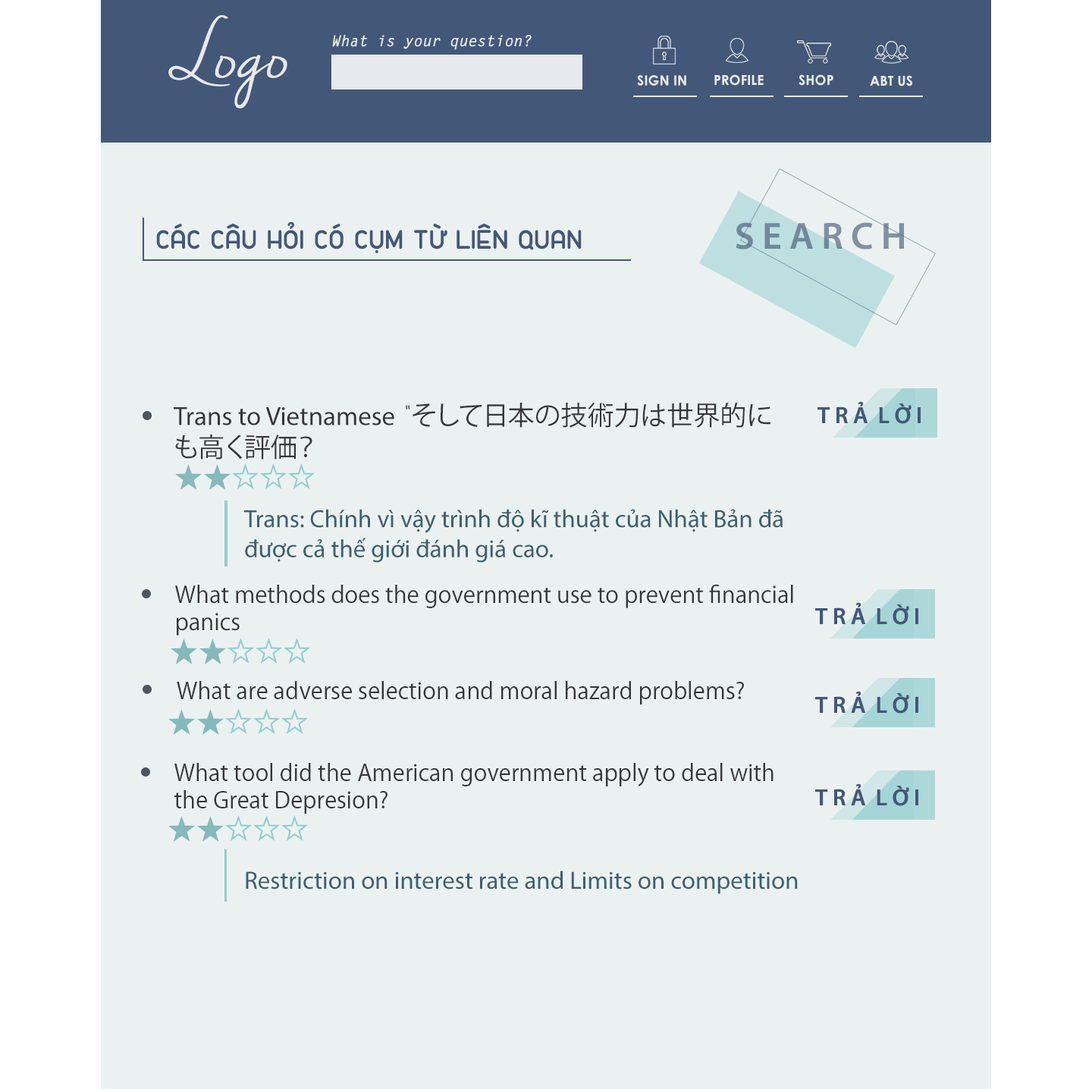
<style>
.page{position:relative;width:1092px;height:1092px;background:#ebf1f1}
.page>*{position:absolute;margin:0}
.t1{font:72.4px "NellaSueDemo";color:#ffffff}
.t2{font:15.2px "LetterGothicStd-BoldSlanted";color:#ffffff}
.t3{font:13.6px "CenturyGothic-Bold";color:#ffffff}
.t4{font:26.5px "FS-Nokio-Bold";color:#435878}
.t5{font:37.9px "MyriadPro-Semibold";color:#70899b}
.t6{font:26.5px "KozGoPr6N-Regular";color:#363636}
.t7{font:26.5px "MyriadPro-Regular";color:#363636}
.t8{font:26.5px "FS-Nokio-Light";color:#363636}
.t9{font:23.6px "MyriadPro-Semibold";color:#435878}
.t10{font:25px "MyriadPro-Regular";color:#3e606f}
.t11{font:22.7px "KozGoPr6N-Regular";color:#363636}
</style>
<div class="page">
<p class="t1" style="left:168px;top:15px;width:119px;height:93px">Logo</p>
<p class="t2" style="left:332px;top:35px;width:200px;height:15px">What is your question?</p>
<p class="t3" style="left:637px;top:75px;width:49px;height:11px">SIGN IN</p>
<p class="t3" style="left:714px;top:74px;width:50px;height:12px">PROFILE</p>
<p class="t3" style="left:799px;top:74px;width:34px;height:12px">SHOP</p>
<p class="t3" style="left:870px;top:75px;width:42px;height:11px">ABT US</p>
<p class="t4" style="left:156px;top:221px;width:426px;height:32px">CÁC CÂU HỎI CÓ CỤM TỪ LIÊN QUAN</p>
<p class="t5" style="left:736px;top:222px;width:168px;height:27px">S E A R C H</p>
<p class="t6" style="left:174px;top:402px;width:596px;height:58px"><span class="t7">Trans to Vietnamese</span><span class="t8"> “</span>そして日本の技術力は世界的に<br>も高く評価？</p>
<p class="t9" style="left:817px;top:401px;width:104px;height:23px">T R Ả  L Ờ I</p>
<p class="t10" style="left:244px;top:509px;width:539px;height:54px">Trans: Chính vì vậy trình độ kĩ thuật của Nhật Bản đã <br>được cả thế giới đánh giá cao.</p>
<p class="t11" style="left:175px;top:584px;width:618px;height:51px">What methods does the government use to prevent financial <br>panics</p>
<p class="t9" style="left:815px;top:602px;width:103px;height:23px">T R Ả  L Ờ I</p>
<p class="t11" style="left:177px;top:681px;width:567px;height:23px">What are adverse selection and moral hazard problems?</p>
<p class="t9" style="left:815px;top:691px;width:103px;height:23px">T R Ả  L Ờ I</p>
<p class="t11" style="left:174px;top:763px;width:599px;height:51px">What tool did the American government apply to deal with <br>the Great Depresion?</p>
<p class="t9" style="left:815px;top:783px;width:103px;height:23px">T R Ả  L Ờ I</p>
<p class="t10" style="left:246px;top:871px;width:552px;height:23px">Restriction on interest rate and Limits on competition</p>
</div>
